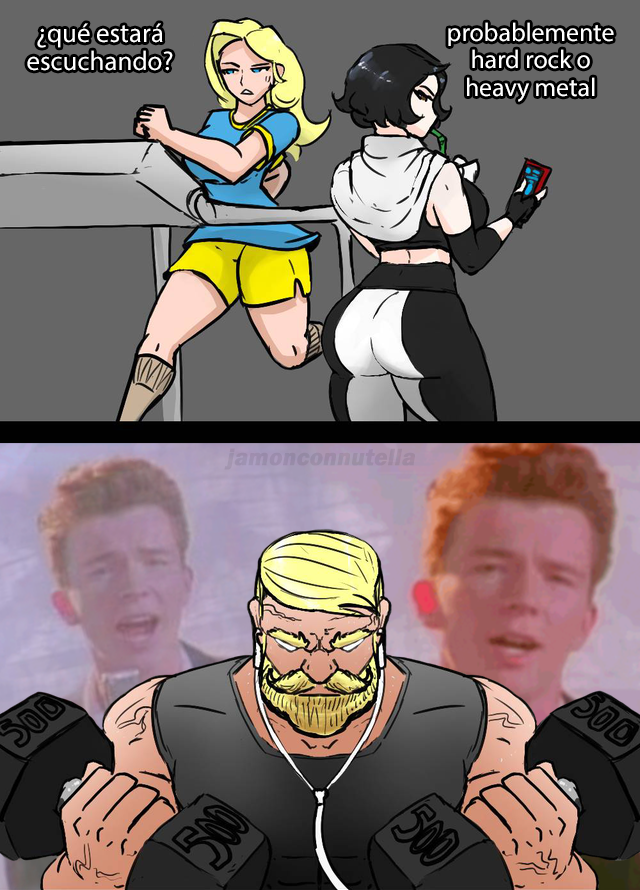
<style>
.page{position:relative;width:640px;height:890px;background:#666666}
.page>*{position:absolute;margin:0}
.t1{font:27px "MyriadPro-Regular";color:#ffffff}
.t2{font:25.8px "MyriadPro-Regular";color:#ffffff}
.t3{font:24.2px "FranklinGothic-Demi";color:#9e8da8;font-weight:bold;font-style:italic}
</style>
<div class="page">
<p class="t1" style="left:27px;top:23px;width:146px;height:48px;text-align:center">¿qué estará<br>escuchando?</p>
<p class="t2" style="left:448px;top:22px;width:166px;height:80px;text-align:center">probablemente<br>hard rock o<br>heavy metal</p>
<p class="t3" style="left:224px;top:448px;width:191px;height:22px">jamonconnutella</p>
</div>
